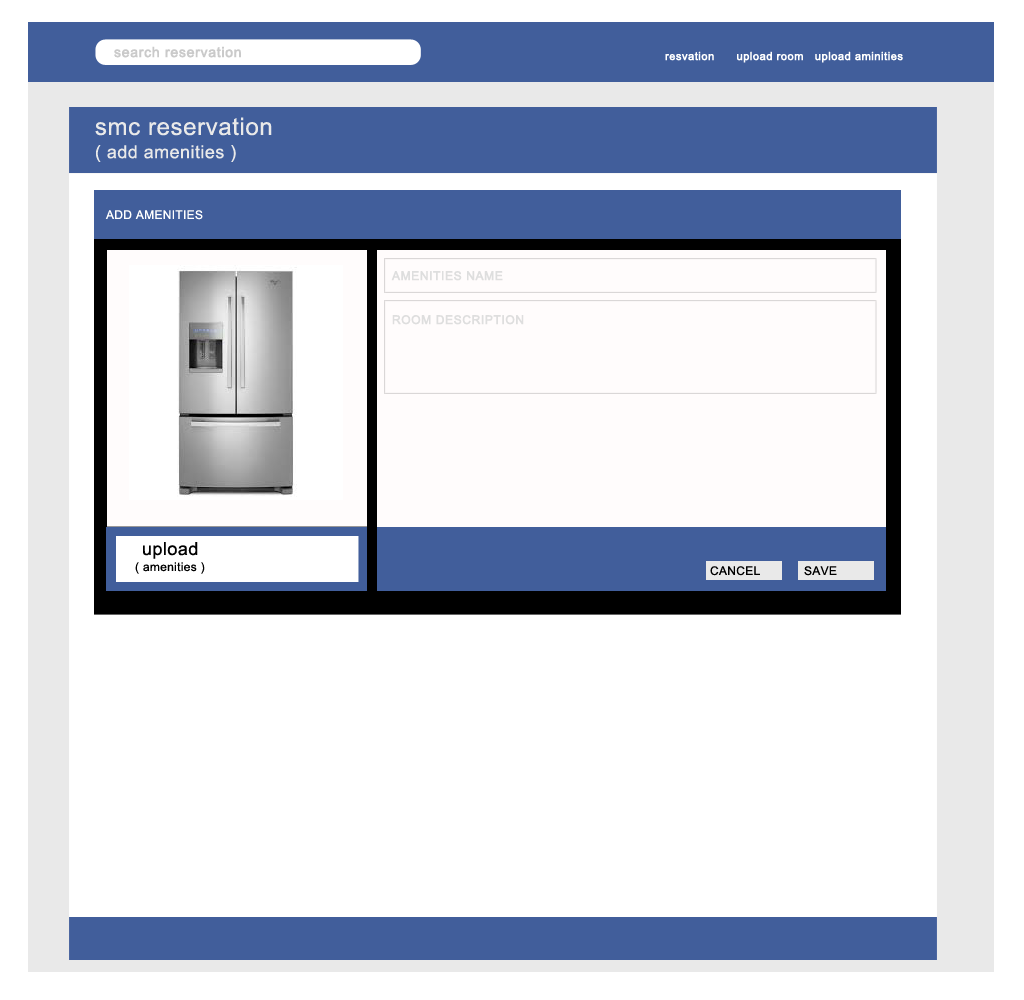
<style>
.page{position:relative;width:1024px;height:1000px;background:#ffffff}
.page>*{position:absolute;margin:0}
.t1{font:14px "ArialMT";letter-spacing:0.025em;color:#cacaca;font-weight:bold}
.t2{font:11px "ArialMT";letter-spacing:0.025em;color:#ffffff;font-weight:bold}
.t3{font:18px/11.6px "ArialMT";letter-spacing:0.025em;color:#e9e9e9}
.t4{font:24px/11.6px "ArialMT";letter-spacing:0.025em;color:#e9e9e9}
.t5{font:12px "ArialMT";letter-spacing:0.025em;color:#ffffff}
.t6{font:12px "ArialMT";letter-spacing:0.025em;color:#dedede;font-weight:bold}
.t7{font:18px "ArialMT";letter-spacing:0.025em;color:#000000}
.t8{font:12px "ArialMT";letter-spacing:0.025em;color:#000000}
</style>
<div class="page">
<p class="t1" style="left:114px;top:46px;width:127px;height:12px">search reservation</p>
<p class="t2" style="left:665px;top:51px;width:238px;height:12px">resvation      upload room   upload aminities</p>
<p class="t3" style="left:95px;top:117px;width:177px;height:45px"><span class="t4">smc reservation <br><br></span>( add amenities )</p>
<p class="t5" style="left:105px;top:210px;width:98px;height:10px">ADD AMENITIES</p>
<p class="t6" style="left:391px;top:271px;width:112px;height:10px">AMENITIES NAME</p>
<p class="t6" style="left:392px;top:315px;width:132px;height:10px">ROOM DESCRIPTION</p>
<p class="t7" style="left:143px;top:542px;width:55px;height:17px">upload</p>
<p class="t8" style="left:135px;top:562px;width:70px;height:12px">( amenities )</p>
<p class="t8" style="left:710px;top:566px;width:50px;height:10px">CANCEL</p>
<p class="t8" style="left:804px;top:566px;width:33px;height:10px">SAVE</p>
</div>
